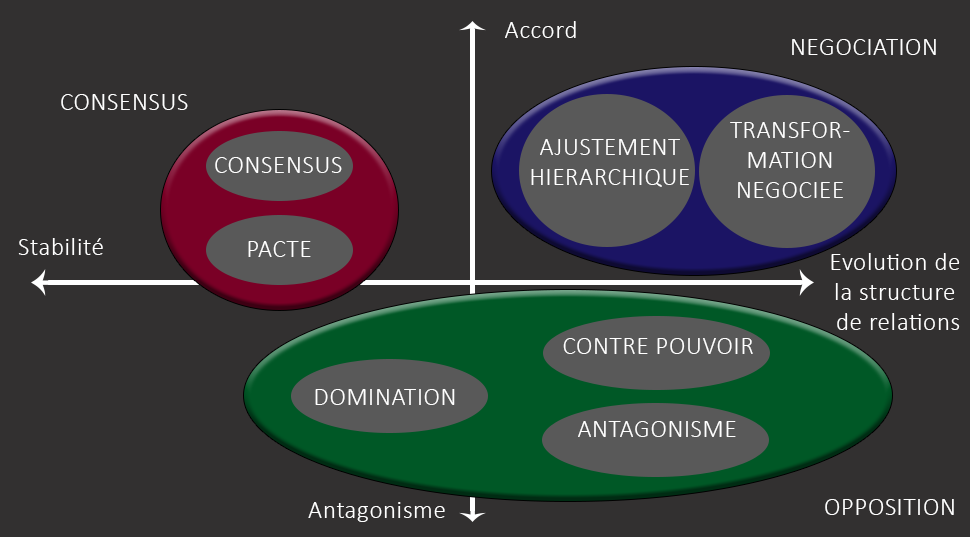
<style>
.page{position:relative;width:970px;height:537px;background:#323030}
.page>*{position:absolute;margin:0}
.t1{font:25px "Calibri-Light";letter-spacing:0.025em;color:#ffffff}
</style>
<div class="page">
<p class="t1" style="left:505px;top:21px;width:71px;height:17px">Accord</p>
<p class="t1" style="left:792px;top:39px;width:144px;height:16px">NEGOCIATION</p>
<p class="t1" style="left:61px;top:94px;width:127px;height:16px">CONSENSUS</p>
<p class="t1" style="left:730px;top:122px;width:120px;height:76px;text-align:center">TRANSFOR-<br>MATION<br>NEGOCIEE</p>
<p class="t1" style="left:531px;top:139px;width:158px;height:48px;text-align:center">AJUSTEMENT<br>HIERARCHIQUE</p>
<p class="t1" style="left:215px;top:157px;width:127px;height:16px">CONSENSUS</p>
<p class="t1" style="left:18px;top:238px;width:85px;height:17px">Stabilité</p>
<p class="t1" style="left:248px;top:241px;width:63px;height:16px">PACTE</p>
<p class="t1" style="left:831px;top:253px;width:129px;height:77px;text-align:center">Evolution de <br>la structure <br>de relations</p>
<p class="t1" style="left:563px;top:338px;width:190px;height:16px">CONTRE POUVOIR</p>
<p class="t1" style="left:315px;top:389px;width:140px;height:16px">DOMINATION</p>
<p class="t1" style="left:578px;top:421px;width:158px;height:16px">ANTAGONISME</p>
<p class="t1" style="left:308px;top:502px;width:137px;height:20px">Antagonisme</p>
<p class="t1" style="left:825px;top:499px;width:129px;height:16px">OPPOSITION</p>
</div>
